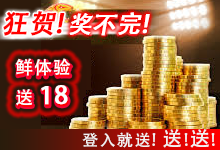
<style>
.page{position:relative;width:220px;height:150px}
.page>*{position:absolute;margin:0}
.t1{font:26px "AdobeHeitiStd-Regular";color:#ff0000;font-weight:bold;font-style:italic}
.t2{font:26px "AdobeHeitiStd-Regular";letter-spacing:0.085em;color:#ff0000;font-weight:bold;font-style:italic}
.t3{font:24px "AdobeHeitiStd-Regular";color:#ffffff;font-weight:bold;font-style:italic}
.t4{font:18px/24px "AdobeHeitiStd-Regular";letter-spacing:0.05em;color:#fbffff}
.t5{font:24px/24px "AdobeHeitiStd-Regular";letter-spacing:0.05em;color:#fbffff;font-weight:bold}
.t6{font:18px/24px "AdobeHeitiStd-Regular";letter-spacing:0.05em}
.t7{font:24px/24px "AdobeHeitiStd-Regular";letter-spacing:0.05em;font-weight:bold}
.t8{font:16px "AdobeHeitiStd-Regular";letter-spacing:0.085em;color:#f2f2f2}
.t9{font:20px "AdobeHeitiStd-Regular";letter-spacing:0.085em;color:#f2f2f2}
</style>
<div class="page">
<p class="t1" style="left:3px;top:11px;width:62px;height:25px">狂贺<span class="t2">!</span></p>
<p class="t1" style="left:3px;top:11px;width:62px;height:25px">狂贺<span class="t2">!</span></p>
<p class="t3" style="left:69px;top:12px;width:81px;height:24px">奖不完!</p>
<p class="t3" style="left:69px;top:12px;width:81px;height:24px">奖不完!</p>
<p class="t4" style="left:15px;top:58px;width:56px;height:48px">鲜体验<br>送 <span class="t5">18</span></p>
<p class="t6" style="left:16px;top:60px;width:56px;height:48px">鲜体验<br>送 <span class="t7">18</span></p>
<p class="t8" style="left:82px;top:129px;width:133px;height:19px">登入就送! <span class="t9">送</span>!<span class="t9">送</span>!</p>
</div>
